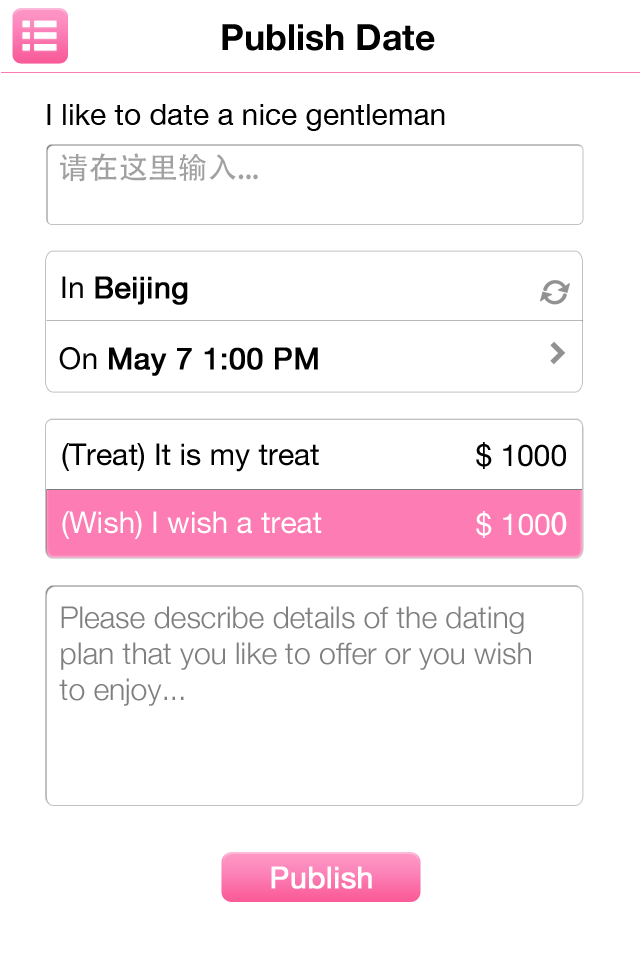
<style>
.page{position:relative;width:640px;height:960px;background:#ffffff}
.page>*{position:absolute;margin:0}
.t1{font:36px "HelveticaNeue-Bold";color:#000000}
.t2{font:30px "HelveticaNeue";color:#000000}
.t3{font:30px "AdobeHeitiStd-Regular";color:#a1a1a1}
.t4{font:30px "HelveticaNeue";color:#000000;font-weight:bold}
.t5{font:30px "HelveticaNeue";color:#ffffff}
.t6{font:30px "AdobeHeitiStd-Regular";color:#ffffff}
.t7{font:30px/36px "HelveticaNeue-Light";color:#7f7f7f}
.t8{font:30px "HelveticaNeue";color:#ffffff;font-weight:bold}
</style>
<div class="page">
<p class="t1" style="left:222px;top:24px;width:213px;height:27px">Publish Date</p>
<p class="t2" style="left:47px;top:104px;width:398px;height:27px">I like to date a nice gentleman</p>
<p class="t3" style="left:60px;top:153px;width:198px;height:29px">请在这里输入...</p>
<p class="t4" style="left:62px;top:276px;width:126px;height:29px"><span class="t2">In </span>Beijing</p>
<p class="t4" style="left:59px;top:347px;width:259px;height:29px"><span class="t2"> On </span>May 7 1:00 PM</p>
<p class="t2" style="left:62px;top:443px;width:257px;height:29px">(Treat) It is my treat</p>
<p class="t2" style="left:476px;top:442px;width:90px;height:27px">$ 1000</p>
<p class="t5" style="left:62px;top:511px;width:260px;height:28px">(Wish) I wish a treat</p>
<p class="t5" style="left:476px;top:511px;width:91px;height:27px">$ 100<span class="t6">0</span></p>
<p class="t7" style="left:59px;top:606px;width:472px;height:100px">Please describe details of the dating plan that you like to offer or you wish to enjoy...</p>
<p class="t8" style="left:271px;top:866px;width:101px;height:23px">Publish</p>
</div>
